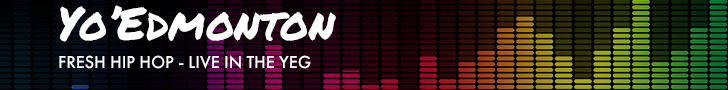
<style>
.page{position:relative;width:728px;height:90px;background:#000000}
.page>*{position:absolute;margin:0}
.t1{font:45.6px "PermanentMarker-Regular";color:#ffffff}
.t2{font:18px "FuturaPT-Medium";color:#ffffff}
</style>
<div class="page">
<p class="t1" style="left:59px;top:5px;width:277px;height:37px">Yo’Edmonton</p>
<p class="t2" style="left:59px;top:55px;width:252px;height:14px">FRESH HIP HOP - LIVE IN THE YEG</p>
</div>
